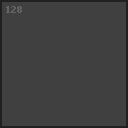
<style>
.page{position:relative;width:128px;height:128px;background:#404040}
.page>*{position:absolute;margin:0}
.t1{font:9px "Verdana-Bold";letter-spacing:-0.025em;color:#636363;text-transform:uppercase}
</style>
<div class="page">
<p class="t1" style="left:6px;top:6px;width:16px;height:7px">128</p>
</div>
